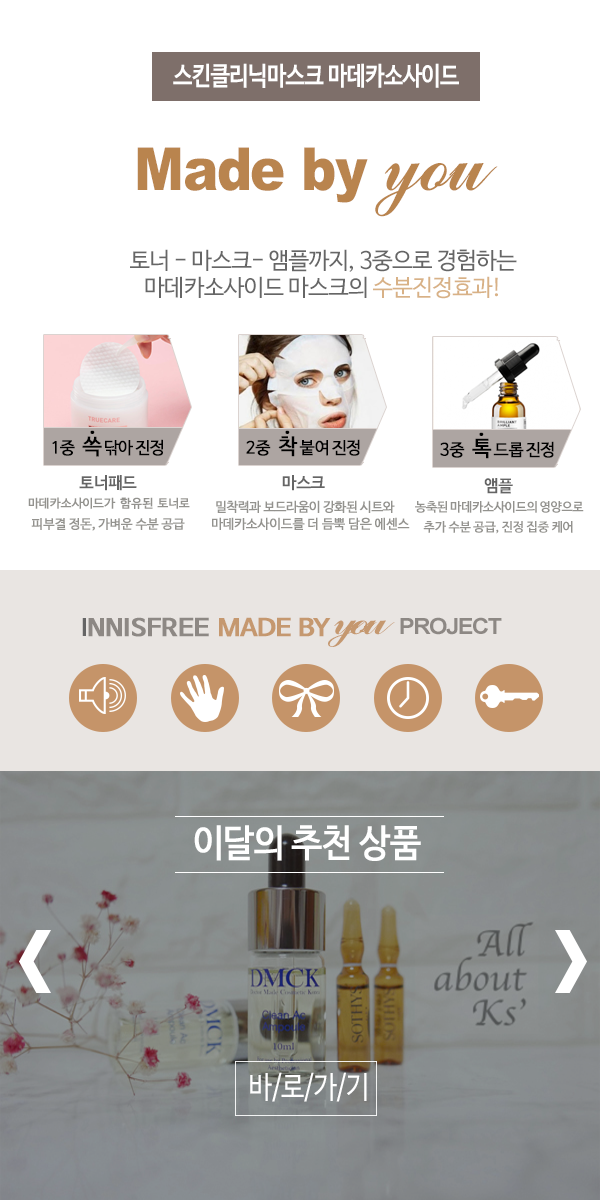
<style>
.page{position:relative;width:600px;height:1200px;background:#ffffff}
.page>*{position:absolute;margin:0}
.t1{font:25.8px "NanumBarunGothicBold";letter-spacing:-0.025em;color:#ffffff;scale:0.84 1}
.t2{font:59.2px "Arial-Black";letter-spacing:-0.025em;color:#b9844e;scale:0.89 1}
.t3{font:87.2px "CommercialScriptBT-Regular";letter-spacing:-0.025em;color:#b9844e;scale:0.89 1}
.t4{font:23.2px "NanumBarunGothic";letter-spacing:-0.025em;color:#666666}
.t5{font:23.2px "NanumBarunGothic";letter-spacing:-0.025em;color:#d8b186}
.t6{font:16.6px "NanumBarunGothic";letter-spacing:-0.025em;color:#000000;font-weight:bold}
.t7{font:21.3px "NanumBarunGothic";letter-spacing:-0.025em;color:#000000;font-weight:bold}
.t8{font:21.3px "NanumBarunGothic";letter-spacing:-0.025em;color:#000000;font-weight:bold;scale:1.05 1}
.t9{font:12.8px "NanumBarunGothic";letter-spacing:-0.025em;color:#93928e;font-weight:bold}
.t10{font:16.5px "NanumBarunGothicBold";letter-spacing:-0.025em;color:#656565}
.t11{font:11.9px/19.2px "NanumBarunGothic";letter-spacing:-0.045em;color:#93928e;font-weight:bold}
.t12{font:11.9px/19.2px "NanumBarunGothic";letter-spacing:-0.005em;color:#93928e;font-weight:bold}
.t13{font:13px/17.4px "NanumBarunGothic";letter-spacing:-0.025em;color:#93928e;font-weight:bold}
.t14{font:13px/22.9px "NanumBarunGothic";letter-spacing:-0.045em;color:#93928e;font-weight:bold}
.t15{font:12.8px "NanumBarunGothicBold";letter-spacing:-0.025em;color:#93928e}
.t16{font:12.8px/19.2px "NanumBarunGothicBold";letter-spacing:-0.045em;color:#93928e}
.t17{font:23.5px "NanumBarunGothicBold";letter-spacing:-0.05em;color:#8d8884;font-weight:bold;scale:1.13 1}
.t18{font:23.5px "NanumBarunGothicBold";letter-spacing:-0.05em;color:#656565;scale:1.13 1}
.t19{font:23.5px "NanumBarunGothicBold";letter-spacing:-0.05em;color:#c5986f;font-weight:bold;scale:1.13 1}
.t20{font:43.6px "CommercialScriptBT-Regular";letter-spacing:-0.125em;color:#c5986f;scale:1.13 1}
.t21{font:22.3px "Arial-BoldMT";letter-spacing:-0.065em;color:#8d8884;scale:1.07 1}
.t22{font:38.1px "NanumBarunGothic";letter-spacing:-0.025em;color:#ffffff;font-weight:bold;scale:0.89 1}
.t23{font:30.9px "NanumBarunGothic";letter-spacing:-0.05em;color:#ffffff;scale:0.85 1}
</style>
<div class="page">
<p class="t1" style="left:173px;top:63px;width:286px;height:25px">스킨클리닉마스크 마데카소사이드</p>
<p class="t2" style="left:137px;top:147px;width:361px;height:70px">Made by <span class="t3">you</span></p>
<p class="t4" style="left:130px;top:249px;width:387px;height:50px;text-align:center">토너 - 마스크- 앰플까지, 3중으로 경험하는<br>마데카소사이드 마스크의 <span class="t5">수분진정효과!</span></p>
<p class="t6" style="left:52px;top:436px;width:111px;height:21px">1중 <span class="t7">쓱 </span>닦아 진정</p>
<p class="t8" style="left:90px;top:430px;width:5px;height:4px">·</p>
<p class="t6" style="left:246px;top:436px;width:114px;height:21px">2중 <span class="t7">착 </span>붙여 진정</p>
<p class="t8" style="left:285px;top:430px;width:5px;height:4px">·</p>
<p class="t6" style="left:440px;top:438px;width:114px;height:21px">3중 <span class="t7">톡 </span>드롭 진정</p>
<p class="t8" style="left:479px;top:432px;width:5px;height:4px">·</p>
<p class="t9" style="left:28px;top:475px;width:162px;height:56px;text-align:center"><span class="t10">토너패드<br></span><span class="t11">마데카소사이드가 </span><span class="t12">함유된 토너로<br></span>피부결 정돈, 가벼운 수분 공급</p>
<p class="t13" style="left:212px;top:475px;width:198px;height:55px;text-align:center"><span class="t10">    마스크<br></span><span class="t14">밀착력과 보드라움이 강화된 시트와<br></span>마데카소사이드를 더 듬뿍 담은 에센스</p>
<p class="t15" style="left:415px;top:478px;width:169px;height:56px;text-align:center"><span class="t10">앰플<br></span><span class="t16">농축된 마데카소사이드의 영양으로<br></span>추가 수분 공급, 진정 집중 케어</p>
<p class="t17" style="left:82px;top:617px;width:313px;height:30px"><span class="t18">I</span>NNISFREE <span class="t19">MADE  BY </span><span class="t20">you</span></p>
<p class="t21" style="left:400px;top:617px;width:102px;height:18px">PROJECT</p>
<p class="t22" style="left:194px;top:825px;width:227px;height:36px">이달의 추천 상품</p>
<p class="t23" style="left:250px;top:1072px;width:117px;height:30px">바/로/가/기</p>
</div>
